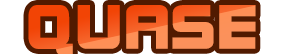
<style>
.page{position:relative;width:286px;height:54px;background:#511a00}
.page>*{position:absolute;margin:0}
.t1{font:69.3px "DFSoGeiStd-W9";scale:0.92 1}
</style>
<div class="page">
<p class="t1" style="left:28px;top:5px;width:228px;height:50px">QUASE</p>
</div>
